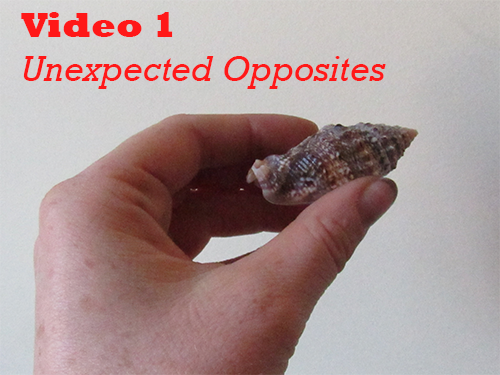
<style>
.page{position:relative;width:500px;height:375px}
.page>*{position:absolute;margin:0}
.t1{font:36px "Rockwell-Italic";color:#ff1818}
.t2{font:36px "Rockwell-ExtraBold";color:#ff1818}
</style>
<div class="page">
<p class="t1" style="left:21px;top:12px;width:365px;height:77px"><span class="t2">Video 1<br></span>Unexpected Opposites</p>
</div>
